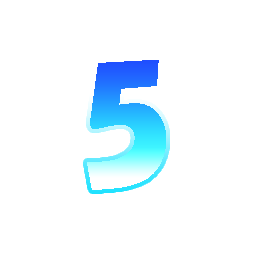
<style>
.page{position:relative;width:256px;height:256px;background:#ffffff}
.page>*{position:absolute;margin:0}
.t1{font:144px "HGSSoeiKakupoptai"}
</style>
<div class="page">
<p class="t1" style="left:87px;top:60px;width:79px;height:130px">5</p>
</div>
